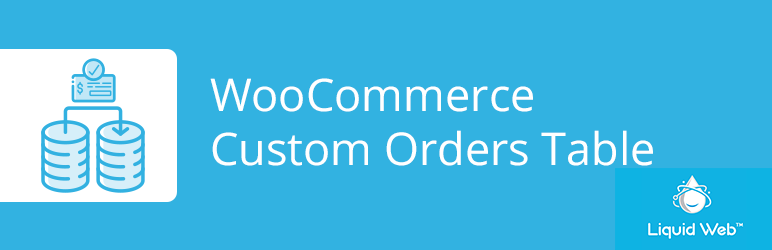
<style>
.page{position:relative;width:772px;height:250px;background:#32b2e1}
.page>*{position:absolute;margin:0}
.t1{font:45px "OpenSans";color:#ffffff}
</style>
<div class="page">
<p class="t1" style="left:210px;top:78px;width:443px;height:88px">WooCommerce<br>Custom Orders Table</p>
</div>
